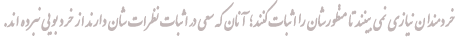
<style>
.page{position:relative;width:455px;height:45px;background:#ffffff}
.page>*{position:absolute;margin:0}
.t1{font:17.3px "IranNastaliq";color:#c1b6b6;font-weight:bold;scale:0.89 1}
</style>
<div class="page">
<p class="t1" style="left:4px;top:0px;width:451px;height:37px">خردمندان نيازي نمي بينند تا منظورشان را اثبات كنند؛ آنان كه سعي در اثبات نظرات شان دارند از خرد بويي نبرده اند.</p>
</div>
